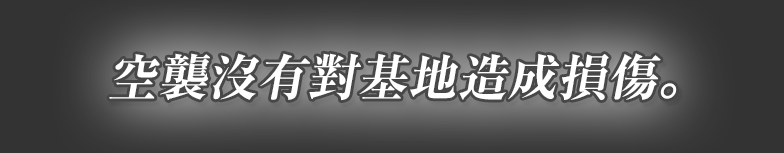
<style>
.page{position:relative;width:784px;height:153px}
.page>*{position:absolute;margin:0}
.t1{font:50px "RyuminPr6N-ExBold";color:#ffffff;font-style:italic}
</style>
<div class="page">
<p class="t1" style="left:109px;top:53px;width:568px;height:48px">空襲沒有對基地造成損傷。</p>
</div>
